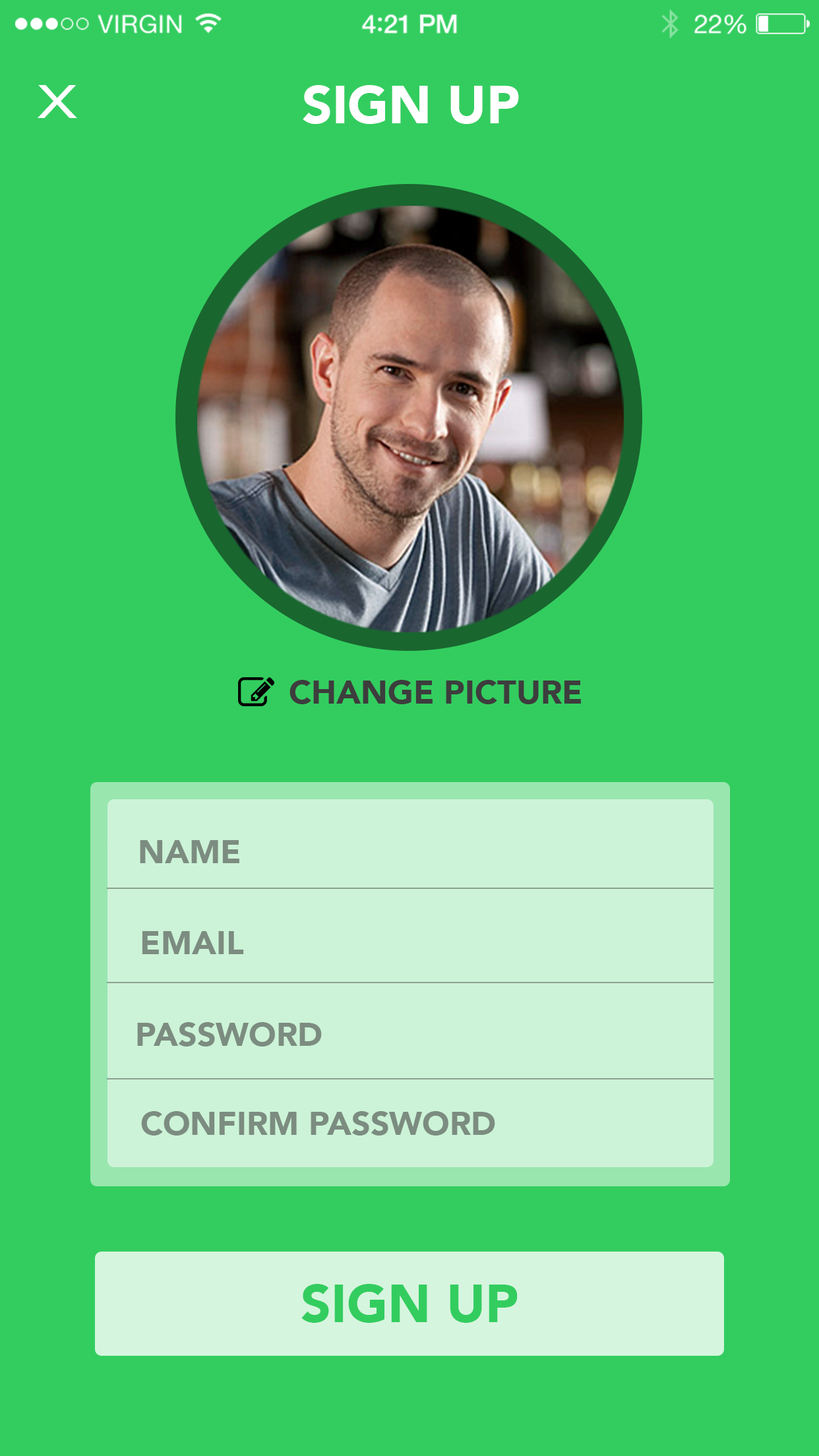
<style>
.page{position:relative;width:819px;height:1456px;background:#33cd5f}
.page>*{position:absolute;margin:0}
.t1{font:46.2px "HelveticaNeue";color:#ffffff;scale:1.39 1}
.t2{font:52.8px "Avenir-Black";color:#ffffff}
.t3{font:33px "Avenir-Black";color:#7c8c80}
.t4{font:52.8px "Avenir-Black";color:#33cd5f}
</style>
<div class="page">
<p class="t1" style="left:38px;top:85px;width:39px;height:33px">X</p>
<p class="t2" style="left:303px;top:85px;width:216px;height:39px">SIGN UP</p>
<p class="t3" style="left:140px;top:840px;width:99px;height:23px">NAME</p>
<p class="t3" style="left:142px;top:931px;width:102px;height:23px">EMAIL</p>
<p class="t3" style="left:137px;top:1022px;width:185px;height:24px">PASSWORD</p>
<p class="t3" style="left:141px;top:1111px;width:354px;height:25px">CONFIRM PASSWORD</p>
<p class="t4" style="left:301px;top:1284px;width:217px;height:39px">SIGN UP</p>
</div>
